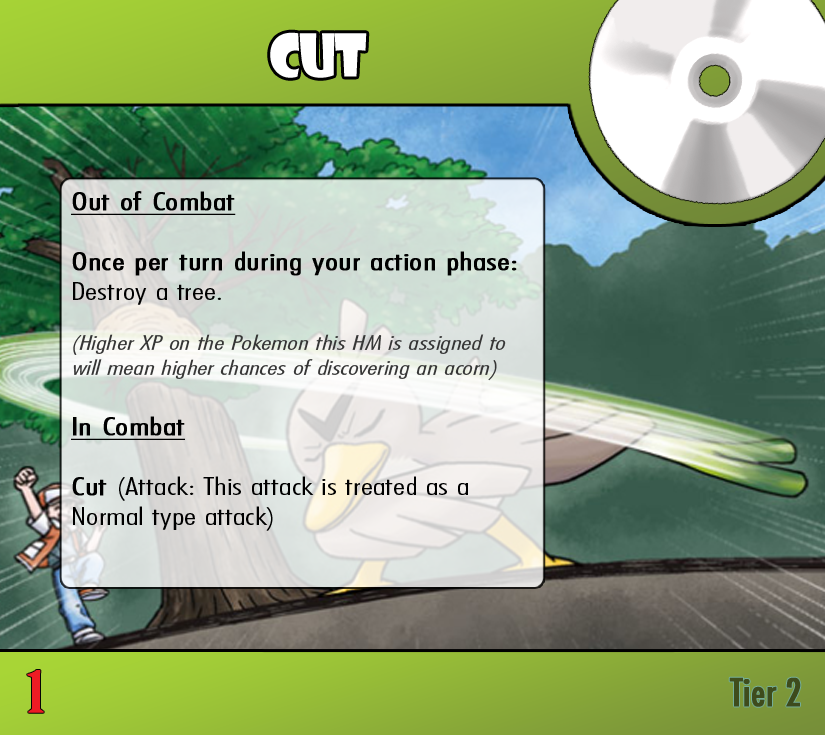
<style>
.page{position:relative;width:825px;height:735px}
.page>*{position:absolute;margin:0}
.t1{font:57.4px "ShowcardGothic-Reg";letter-spacing:-0.025em;color:#ffffff;scale:0.91 1}
.t2{font:20.8px "FuturaCondensedBQ-Light";color:#353535;font-style:italic;scale:1.5 1}
.t3{font:25px "FuturaCondensedBQ-Light";color:#000000;font-weight:bold;text-decoration:underline;scale:1.5 1}
.t4{font:25px "FuturaCondensedBQ-Light";color:#000000;font-weight:bold;scale:1.5 1}
.t5{font:25px "FuturaCondensedBQ-Light";color:#000000;scale:1.5 1}
.t6{font:55.6px "BirchStd";color:#ed1c24;font-weight:bold;scale:1.5 1}
.t7{font:37.5px "Futura-Condensed-Normal";color:#3e4c1c;font-weight:bold}
</style>
<div class="page">
<p class="t1" style="left:270px;top:32px;width:97px;height:46px">Cut</p>
<p class="t2" style="left:71px;top:191px;width:446px;height:340px"><span class="t3">Out of Combat</span><span class="t4"><br><br>Once per turn during your action phase: </span><span class="t5">Destroy a tree.<br><br></span>(Higher XP on the Pokemon this HM is assigned to will mean higher chances of discovering an acorn)<br><br><span class="t3">In Combat<br><br></span><span class="t4">Cut </span><span class="t5">(Attack: This attack is treated as a Normal type attack)</span></p>
<p class="t6" style="left:27px;top:670px;width:17px;height:43px">1</p>
<p class="t7" style="left:729px;top:677px;width:72px;height:30px">Tier 2</p>
</div>
